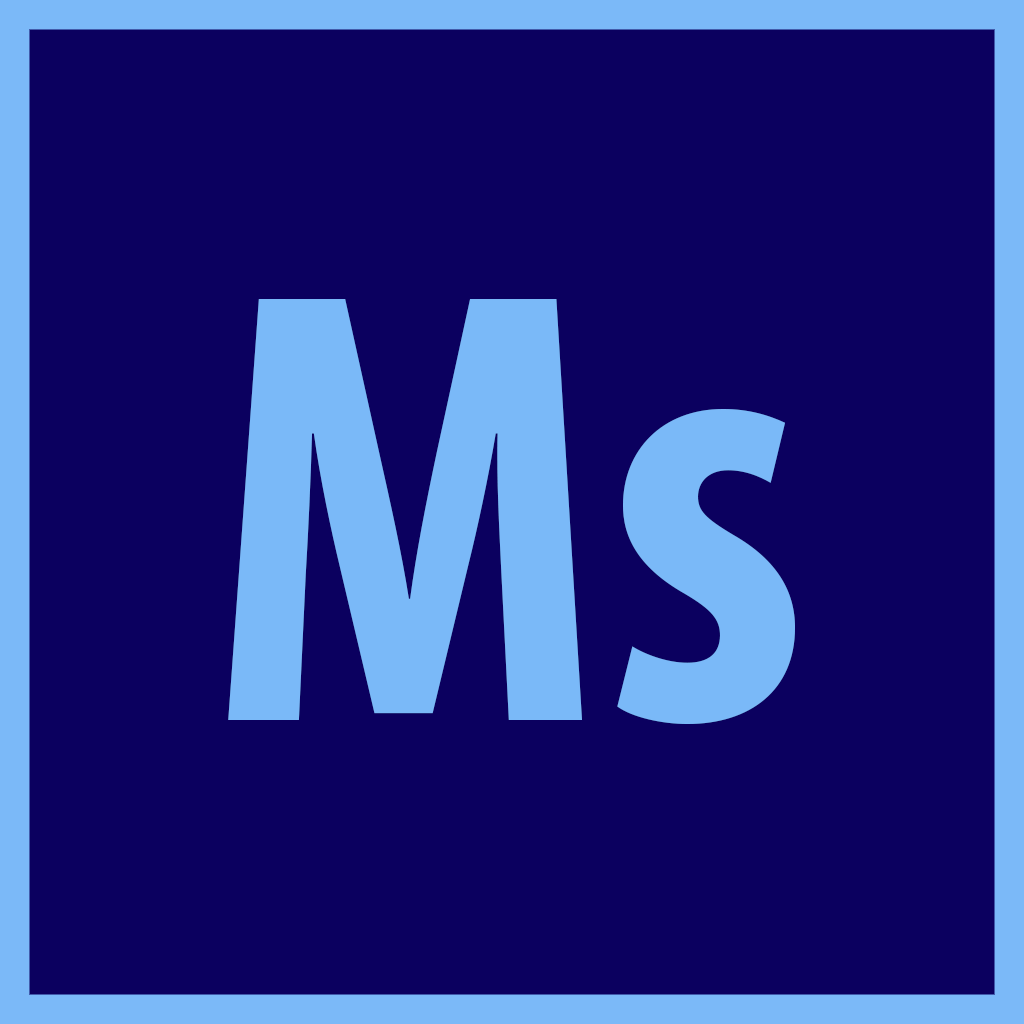
<style>
.page{position:relative;width:1024px;height:1024px;background:#0b005f}
.page>*{position:absolute;margin:0}
.t1{font:625px "MyriadPro-BoldCond";color:#7ab9f8}
</style>
<div class="page">
<p class="t1" style="left:228px;top:299px;width:567px;height:425px">Ms</p>
</div>
